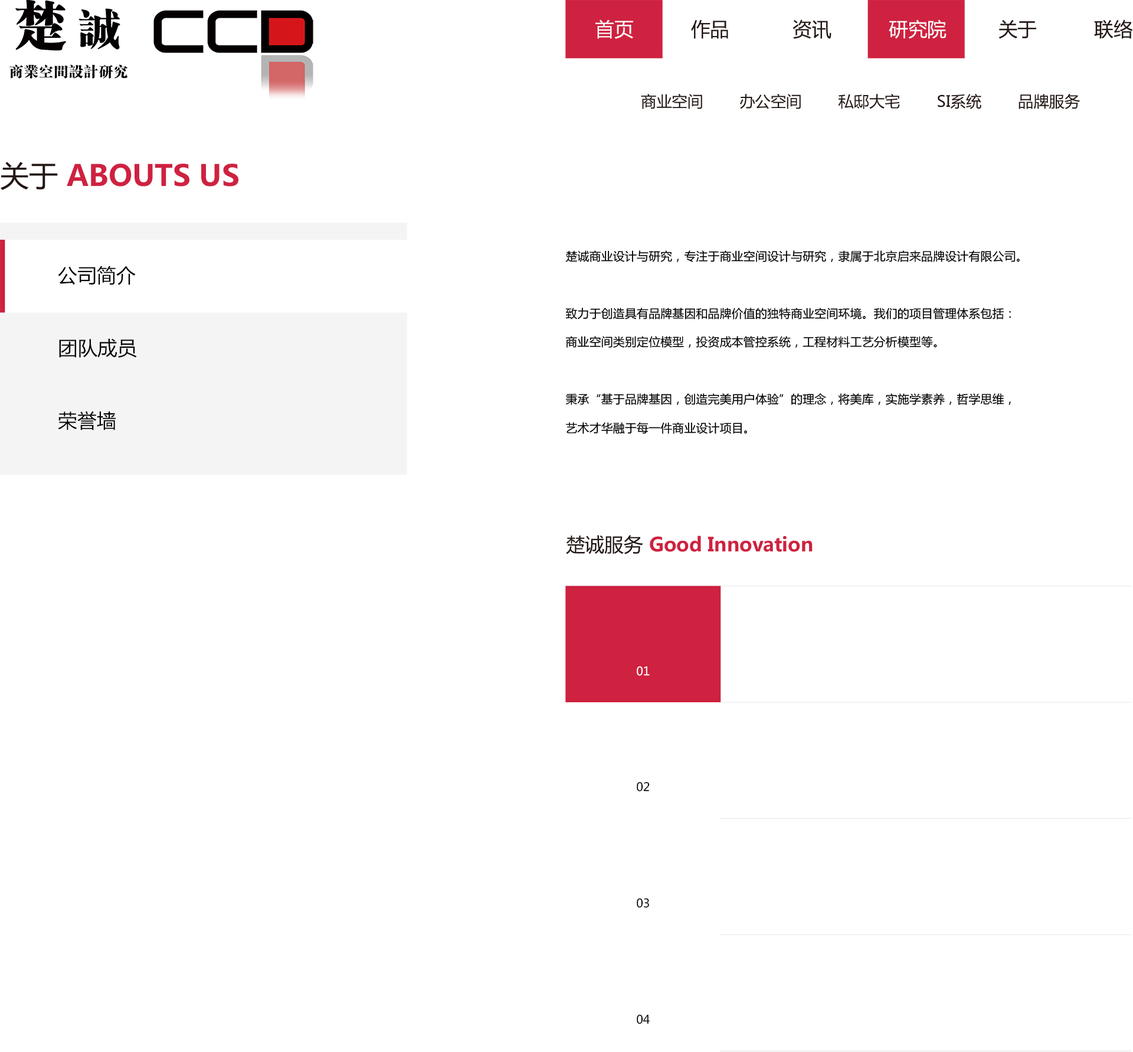
<style>
.page{position:relative;width:1133px;height:1052px;background:#ffffff}
.page>*{position:absolute;margin:0}
.t1{font:19.4px "MicrosoftYaHei";color:#221714}
.t2{font:19.4px "MicrosoftYaHei";color:#ffffff}
.t3{font:15.5px "MicrosoftYaHei";color:#221714}
.t4{font:29.1px "MicrosoftYaHei-Bold";color:#ce2240}
.t5{font:29.1px "MicrosoftYaHei";color:#221714}
.t6{font:11.6px/28.7px "MicrosoftYaHei";letter-spacing:0.02em;color:#000000}
.t7{font:19.4px "MicrosoftYaHei";color:#000000}
.t8{font:19.4px "MicrosoftYaHei-Bold";color:#ce2240}
.t9{font:11.6px "MicrosoftYaHei";color:#ffffff}
.t10{font:11.6px "MicrosoftYaHei";color:#000000}
</style>
<div class="page">
<p class="t1" style="left:596px;top:19px;width:537px;height:20px"><span class="t2">首页</span>          作品           资讯          <span class="t2">研究院</span>         关于          联络</p>
<p class="t3" style="left:641px;top:94px;width:439px;height:15px">商业空间        办公空间        私邸大宅        SI系统        品牌服务</p>
<p class="t4" style="left:1px;top:162px;width:238px;height:28px"><span class="t5">关于 </span>ABOUTS US</p>
<p class="t6" style="left:566px;top:250px;width:454px;height:184px">楚诚商业设计与研究，专注于商业空间设计与研究，隶属于北京启来品牌设计有限公司。 <br><br>致力于创造具有品牌基因和品牌价值的独特商业空间环境。我们的项目管理体系包括：<br>商业空间类别定位模型，投资成本管控系统，工程材料工艺分析模型等。<br><br>秉承“基于品牌基因，创造完美用户体验”的理念，将美库，实施学素养，哲学思维，<br>艺术才华融于每一件商业设计项目。</p>
<p class="t7" style="left:58px;top:266px;width:78px;height:19px">公司简介</p>
<p class="t7" style="left:59px;top:338px;width:78px;height:20px">团队成员</p>
<p class="t7" style="left:58px;top:411px;width:58px;height:19px">荣誉墙</p>
<p class="t8" style="left:566px;top:535px;width:247px;height:19px"><span class="t1">楚诚服务 </span>Good Innovation</p>
<p class="t9" style="left:637px;top:666px;width:13px;height:10px">01</p>
<p class="t10" style="left:637px;top:782px;width:13px;height:10px">02</p>
<p class="t10" style="left:637px;top:898px;width:12px;height:10px">03</p>
<p class="t10" style="left:637px;top:1014px;width:13px;height:10px">04</p>
</div>
